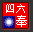
<style>
.page{position:relative;width:33px;height:32px;background:#f20000}
.page>*{position:absolute;margin:0}
.t1{font:10.4px "SimSun";color:#ffffff}
.t2{font:11.7px "SimSun";color:#ffffff}
</style>
<div class="page">
<p class="t1" style="left:6px;top:4px;width:19px;height:9px">四六</p>
<p class="t2" style="left:16px;top:15px;width:11px;height:12px">奉</p>
</div>
